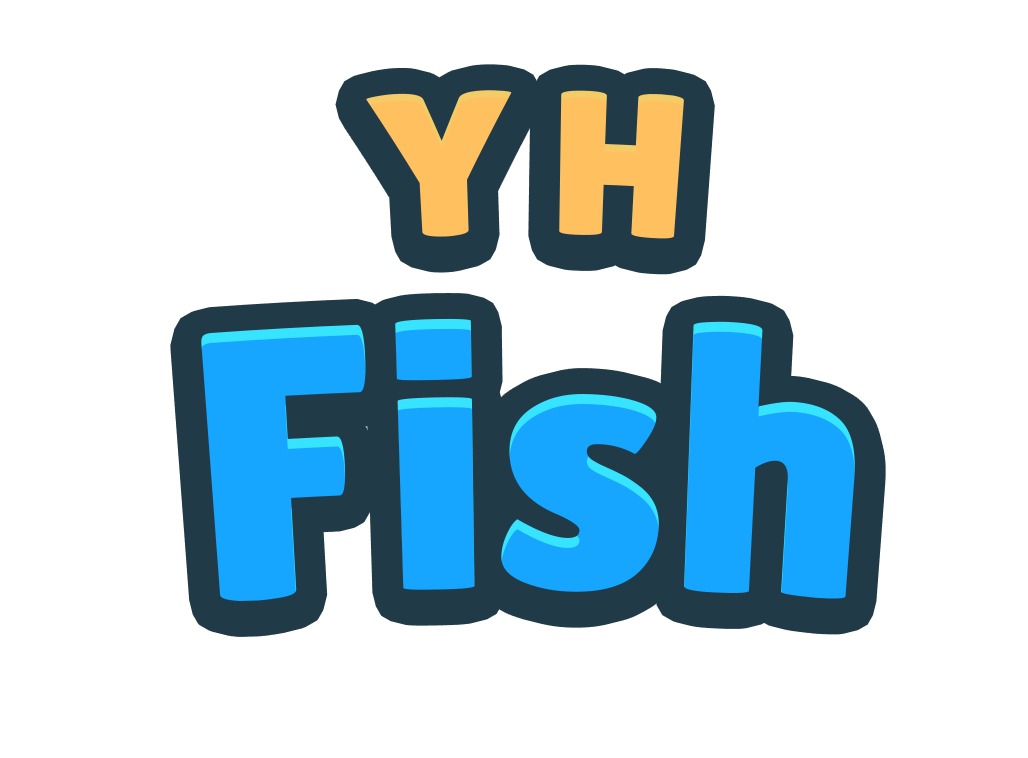
<style>
.page{position:relative;width:1028px;height:758px;background:#ffffff}
.page>*{position:absolute;margin:0}
.t1{font:205.6px "LilitaOne";color:#ffc160}
.t2{font:380.3px "LilitaOne";color:#16a5ff}
</style>
<div class="page">
<p class="t1" style="left:366px;top:90px;width:318px;height:149px">Y H</p>
<p class="t2" style="left:201px;top:318px;width:654px;height:283px">Fish</p>
</div>
